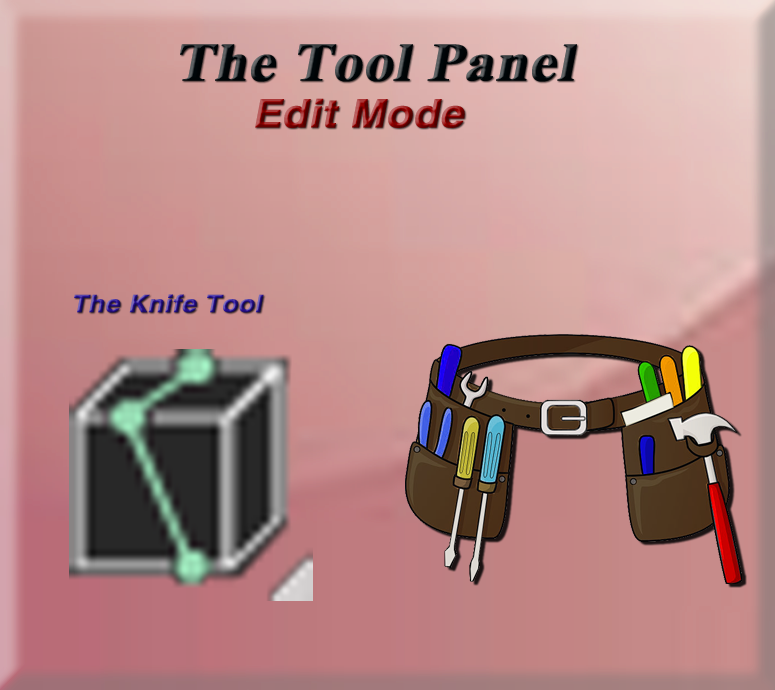
<style>
.page{position:relative;width:775px;height:690px}
.page>*{position:absolute;margin:0}
.t1{font:53.9px "TimesNewRomanPS-BoldMT";color:#000609;font-weight:bold;font-style:italic;scale:1.08 1}
.t2{font:39.1px "HelveticaLTStd-Bold";font-weight:bold;font-style:italic;scale:1.08 1}
.t3{font:53.9px "TimesNewRomanPS-BoldMT";font-weight:bold;font-style:italic;scale:1.08 1}
.t4{font:24.2px "HelveticaLTStd-Bold";font-weight:bold;font-style:italic;scale:1.08 1}
</style>
<div class="page">
<p class="t1" style="left:180px;top:44px;width:397px;height:38px">The Tool Panel</p>
<p class="t2" style="left:255px;top:98px;width:210px;height:30px"><span class="t3"> </span>Edit Mode</p>
<p class="t4" style="left:74px;top:294px;width:190px;height:19px">The Knife Tool</p>
</div>
